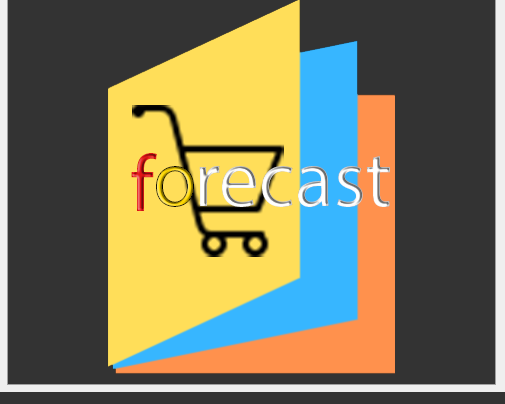
<style>
.page{position:relative;width:505px;height:404px;background:#333333}
.page>*{position:absolute;margin:0}
.t1{font:80px "MyriadPro-Regular"}
</style>
<div class="page">
<p class="t1" style="left:131px;top:153px;width:26px;height:58px">f</p>
<p class="t1" style="left:199px;top:156px;width:191px;height:51px">recast</p>
<p class="t1" style="left:156px;top:166px;width:38px;height:41px">o</p>
</div>
